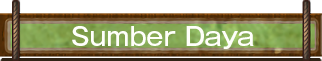
<style>
.page{position:relative;width:322px;height:61px;background:#ffffff}
.page>*{position:absolute;margin:0}
.t1{font:25px "GothicMB101Pro-Medium";color:#fffffa}
</style>
<div class="page">
<p class="t1" style="left:72px;top:26px;width:182px;height:23px">Sumber Daya</p>
</div>
